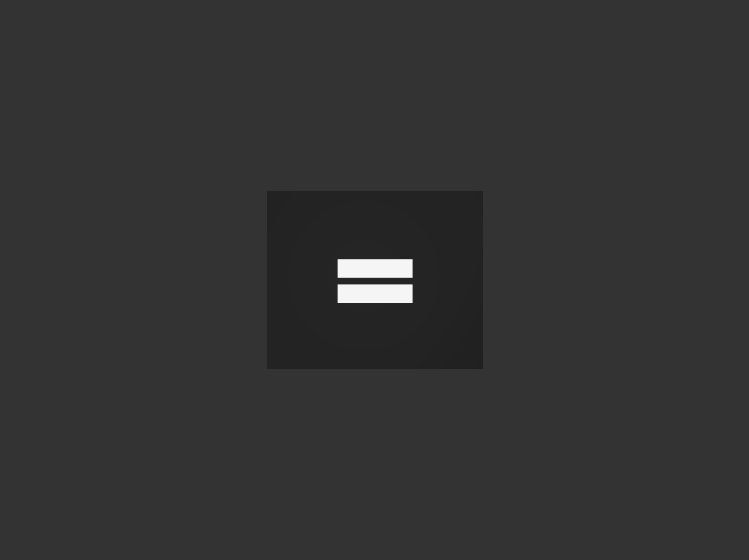
<style>
.page{position:relative;width:749px;height:560px;background:#333333}
.page>*{position:absolute;margin:0}
.t1{font:150px "Bauhaus93";color:#f5f5f5;font-variant:small-caps}
</style>
<div class="page">
<p class="t1" style="left:337px;top:259px;width:76px;height:44px">=</p>
</div>
